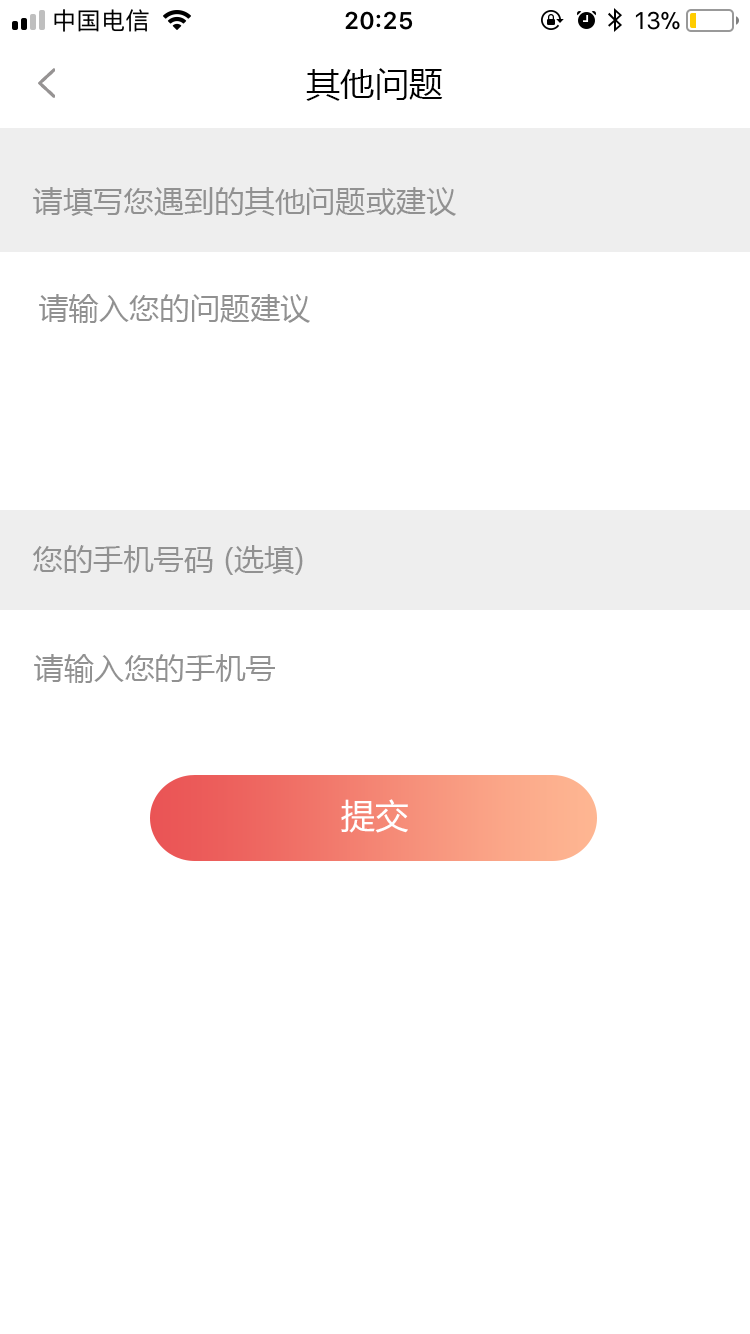
<style>
.page{position:relative;width:750px;height:1334px;background:#ffffff}
.page>*{position:absolute;margin:0}
.t1{font:34px "MicrosoftYaHei";letter-spacing:0.01em;color:#000000}
.t2{font:30px "MicrosoftYaHei";letter-spacing:0.01em;color:#919191}
.t3{font:34.1px "MicrosoftYaHei";color:#ffffff}
</style>
<div class="page">
<p class="t1" style="left:306px;top:68px;width:137px;height:33px">其他问题</p>
<p class="t2" style="left:33px;top:187px;width:423px;height:29px">请填写您遇到的其他问题或建议</p>
<p class="t2" style="left:39px;top:294px;width:271px;height:29px">请输入您的问题建议</p>
<p class="t2" style="left:32px;top:545px;width:271px;height:30px">您的手机号码 (选填)</p>
<p class="t2" style="left:34px;top:654px;width:241px;height:29px">请输入您的手机号</p>
<p class="t3" style="left:341px;top:799px;width:67px;height:34px">提交</p>
</div>
